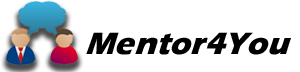
<style>
.page{position:relative;width:300px;height:72px;background:#ffffff}
.page>*{position:absolute;margin:0}
.t1{font:33.3px "ErasITC-Bold";letter-spacing:0.005em;color:#000000;scale:0.97 1}
</style>
<div class="page">
<p class="t1" style="left:86px;top:32px;width:205px;height:23px">Mentor4You</p>
</div>
